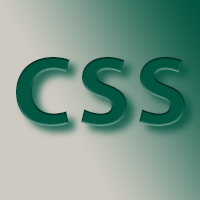
<style>
.page{position:relative;width:200px;height:200px;background:#cecac1}
.page>*{position:absolute;margin:0}
.t1{font:100px "MyriadPro-Bold";letter-spacing:0.04em;color:#025541}
</style>
<div class="page">
<p class="t1" style="left:16px;top:57px;width:169px;height:69px">CSS</p>
</div>
